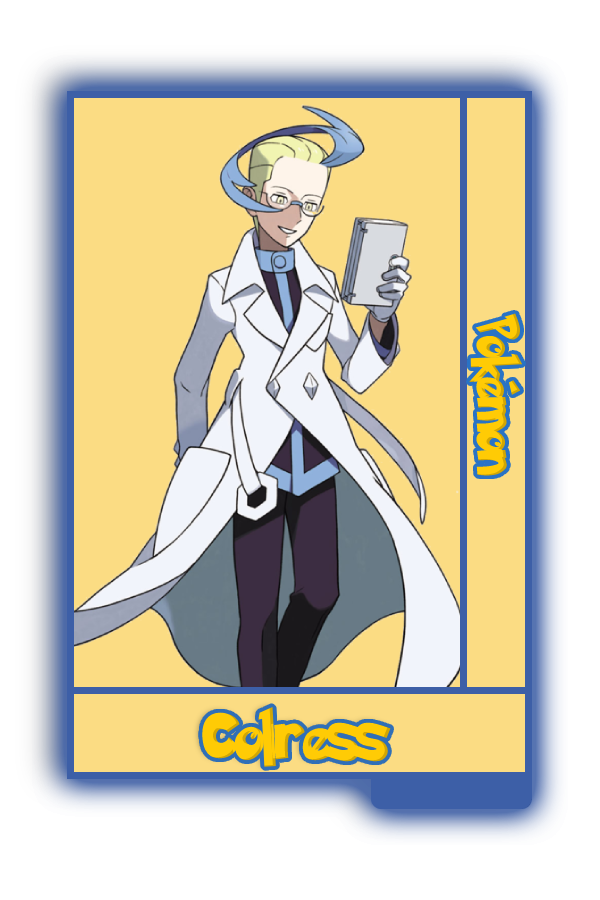
<style>
.page{position:relative;width:600px;height:900px;background:#fbdc83}
.page>*{position:absolute;margin:0}
.t1{font:48.8px "PokemonSolidNormal";color:#ffcb05;scale:0.8 1}
.t2{font:56.6px "PokemonSolidNormal";color:#ffcb05;scale:0.92 1}
</style>
<div class="page">
<p class="t1" style="left:469px;top:313px;width:54px;height:163px;rotate:90deg">Pokémon</p>
<p class="t2" style="left:202px;top:706px;width:189px;height:61px">Colress</p>
</div>
